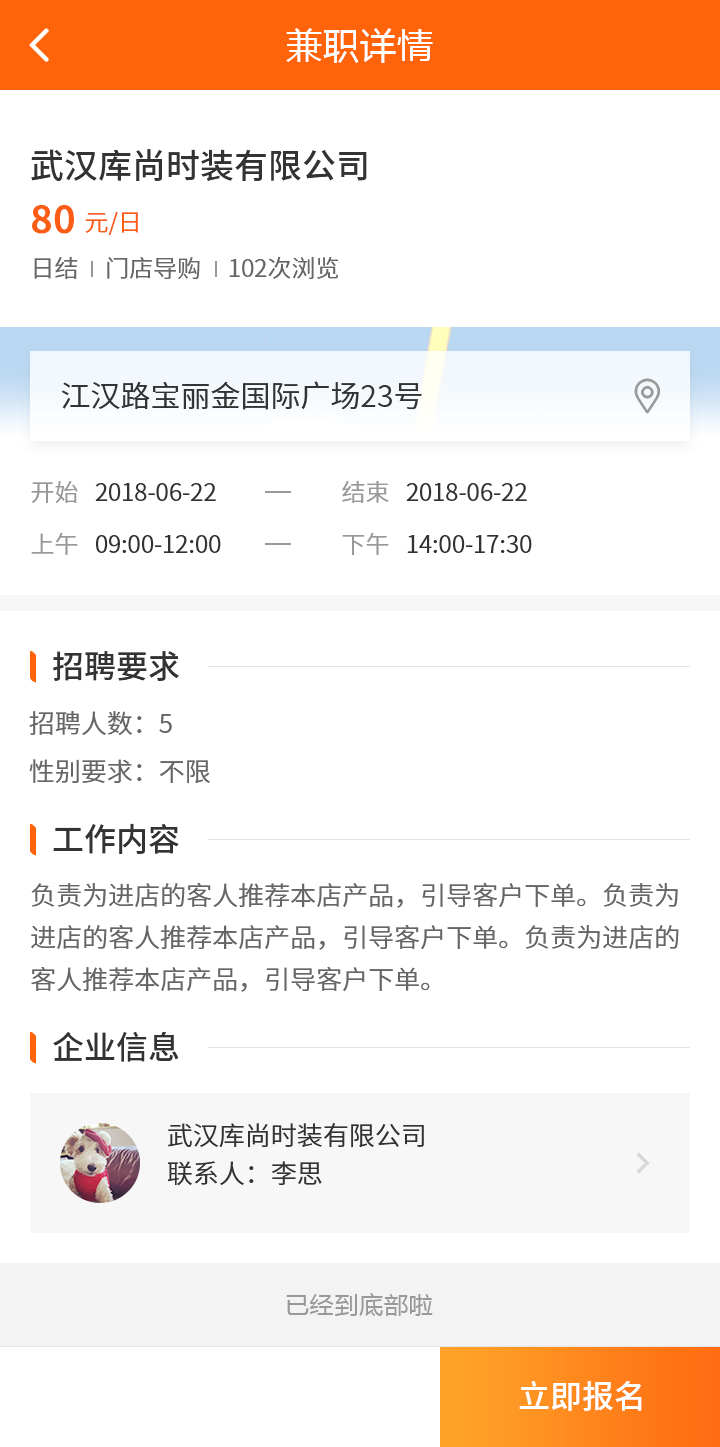
<style>
.page{position:relative;width:720px;height:1447px;background:#ffffff}
.page>*{position:absolute;margin:0}
.t1{font:36px "MicrosoftYaHei";letter-spacing:0.03em;color:#ffffff}
.t2{font:34px "NotoSansCJKsc-Medium";color:#333333;font-variant:small-caps}
.t3{font:24px "NotoSansCJKsc-DemiLight";color:#fb5d15;font-variant:small-caps}
.t4{font:38px "NotoSansCJKsc-Medium";color:#fb5d15;font-variant:small-caps;font-weight:bold}
.t5{font:24px "NotoSansCJKsc-DemiLight";color:#666666;font-variant:small-caps}
.t6{font:30px "NotoSansCJKsc-DemiLight";color:#333333;font-variant:small-caps}
.t7{font:24px "NotoSansCJKsc-DemiLight";color:#333333;font-variant:small-caps}
.t8{font:24px "NotoSansCJKsc-DemiLight";color:#999999;font-variant:small-caps}
.t9{font:32px "NotoSansCJKsc-Medium";color:#333333;font-variant:small-caps}
.t10{font:26px "NotoSansCJKsc-DemiLight";color:#666666;font-variant:small-caps}
.t11{font:26px/42px "NotoSansCJKsc-DemiLight";color:#666666;font-variant:small-caps}
.t12{font:26px "NotoSansCJKsc-DemiLight";color:#333333;font-variant:small-caps}
.t13{font:24px "MicrosoftYaHei";letter-spacing:0.03em;color:#999999}
.t14{font:32px "NotoSansCJKsc-Medium";color:#ffffff;font-variant:small-caps}
</style>
<div class="page">
<p class="t1" style="left:286px;top:28px;width:147px;height:35px">兼职详情</p>
<p class="t2" style="left:31px;top:149px;width:336px;height:32px">武汉库尚时装有限公司</p>
<p class="t3" style="left:32px;top:205px;width:106px;height:31px"><span class="t4">80 </span>元/日</p>
<p class="t5" style="left:34px;top:256px;width:304px;height:23px">日结     门店导购     102次浏览</p>
<p class="t6" style="left:61px;top:381px;width:361px;height:29px">江汉路宝丽金国际广场23号</p>
<p class="t7" style="left:31px;top:481px;width:185px;height:22px"><span class="t8">开始   </span>2018-06-22</p>
<p class="t7" style="left:342px;top:480px;width:185px;height:23px"><span class="t8">结束   </span>2018-06-22</p>
<p class="t7" style="left:31px;top:532px;width:190px;height:23px"><span class="t8">上午   </span>09:00-12:00</p>
<p class="t7" style="left:342px;top:532px;width:190px;height:23px"><span class="t8">下午   </span>14:00-17:30</p>
<p class="t9" style="left:53px;top:651px;width:126px;height:30px">招聘要求</p>
<p class="t10" style="left:29px;top:711px;width:143px;height:24px">招聘人数：5</p>
<p class="t10" style="left:29px;top:759px;width:181px;height:25px">性别要求：不限</p>
<p class="t9" style="left:53px;top:823px;width:126px;height:31px">工作内容</p>
<p class="t11" style="left:31px;top:882px;width:648px;height:110px">负责为进店的客人推荐本店产品，引导客户下单。负责为进店的客人推荐本店产品，引导客户下单。负责为进店的客人推荐本店产品，引导客户下单。</p>
<p class="t9" style="left:53px;top:1031px;width:126px;height:31px">企业信息</p>
<p class="t12" style="left:168px;top:1123px;width:256px;height:25px">武汉库尚时装有限公司</p>
<p class="t12" style="left:167px;top:1161px;width:155px;height:25px">联系人：李思</p>
<p class="t13" style="left:286px;top:1293px;width:147px;height:23px">已经到底部啦</p>
<p class="t14" style="left:519px;top:1381px;width:123px;height:30px">立即报名</p>
</div>
